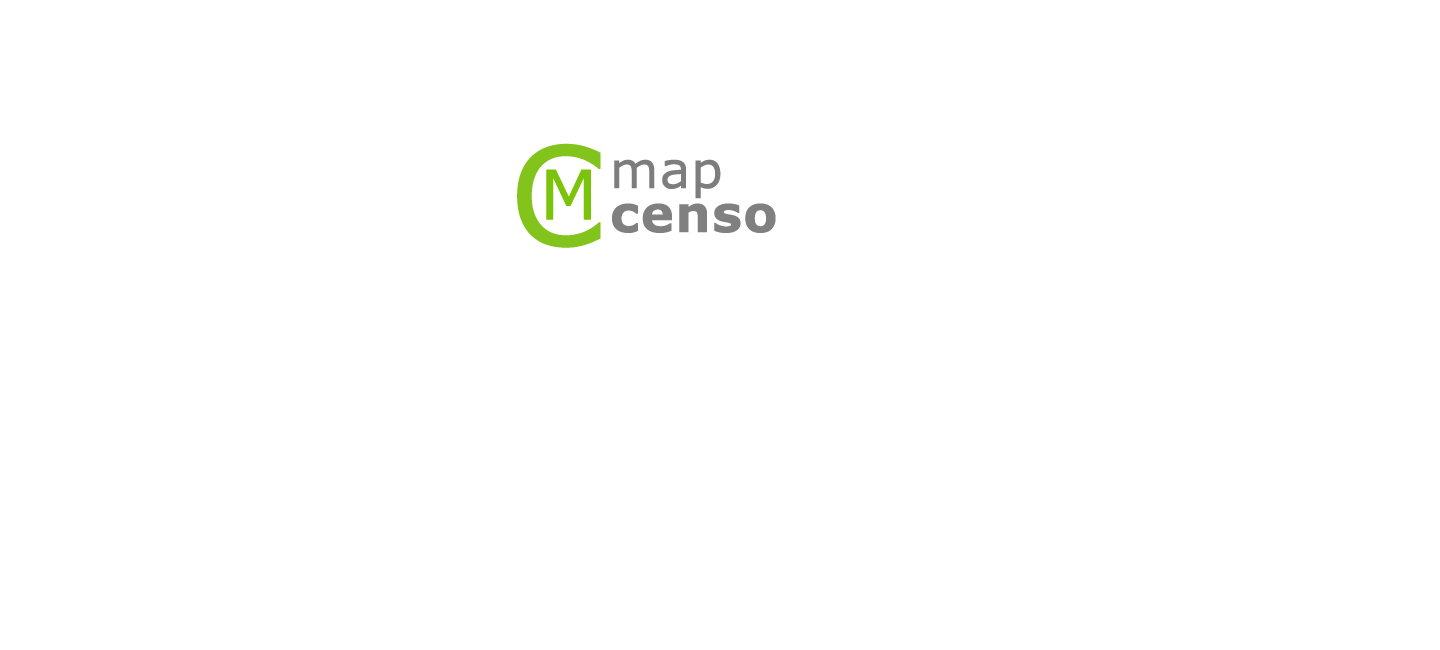
<style>
.page{position:relative;width:1440px;height:650px;background:#ffffff}
.page>*{position:absolute;margin:0}
.t1{font:136.4px "Verdana";color:#82c31c;font-weight:bold}
.t2{font:50px "Verdana";color:#7d7d7d;font-weight:bold}
.t3{font:68.2px "Verdana";color:#7bc40b;font-weight:bold}
.t4{font:50px "Verdana-Bold";color:#808080;font-weight:bold}
</style>
<div class="page">
<p class="t1" style="left:517px;top:143px;width:84px;height:105px">C</p>
<p class="t2" style="left:614px;top:159px;width:107px;height:40px">map</p>
<p class="t3" style="left:546px;top:169px;width:45px;height:51px">M</p>
<p class="t4" style="left:612px;top:203px;width:164px;height:30px">censo</p>
</div>
